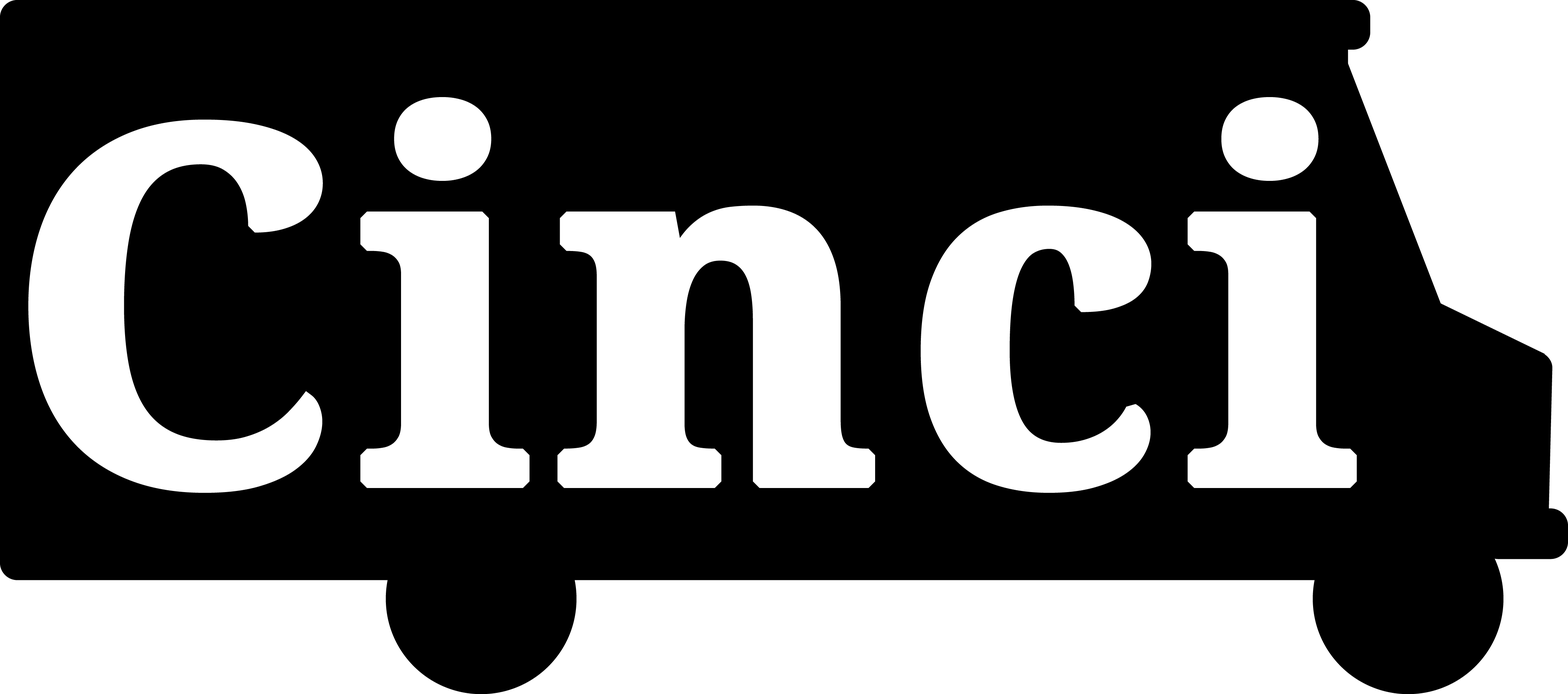
<style>
.page{position:relative;width:1568px;height:694px;background:#000000}
.page>*{position:absolute;margin:0}
.t1{font:490.4px "DroidSerif-Bold";letter-spacing:0.02em;color:#ffffff;font-weight:bold}
</style>
<div class="page">
<p class="t1" style="left:28px;top:97px;width:1329px;height:396px">Cinci</p>
</div>
